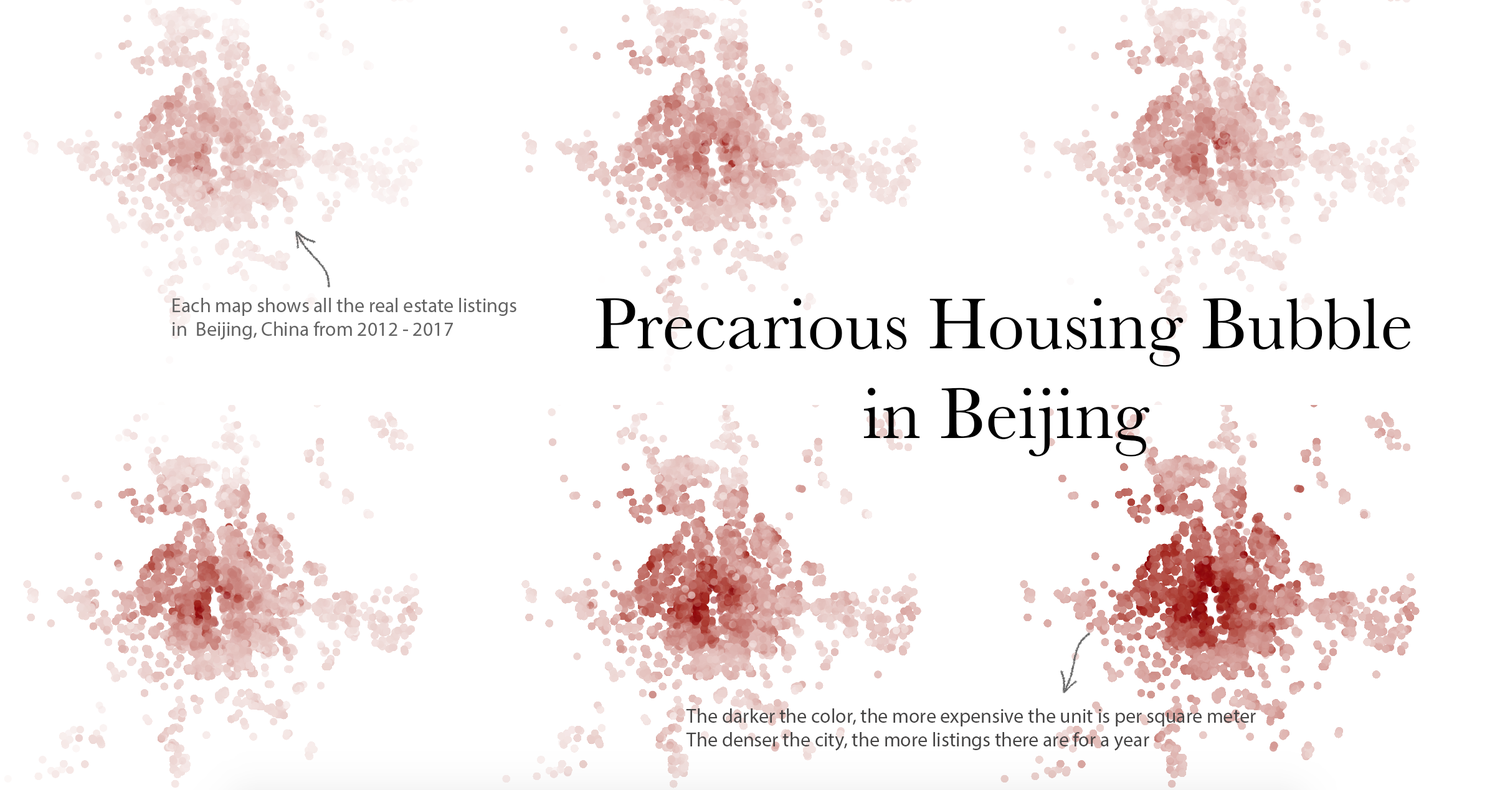
<style>
.page{position:relative;width:1510px;height:790px;background:#ffffff}
.page>*{position:absolute;margin:0}
.t1{font:74.7px "Baskerville";color:#000000}
.t2{font:19.9px "MyriadPro-Regular";color:#454444}
</style>
<div class="page">
<p class="t1" style="left:595px;top:298px;width:815px;height:159px">Precarious Housing Bubble <br>            in Beijing</p>
<p class="t2" style="left:686px;top:708px;width:570px;height:43px">The darker the color, the more expensive the unit is per square meter<br>The denser the city, the more listings there are for a year</p>
</div>
